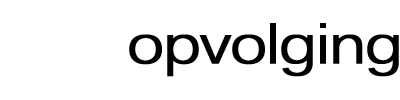
<style>
.page{position:relative;width:400px;height:100px;background:#ffffff}
.page>*{position:absolute;margin:0}
.t1{font:54.4px "Kalinga";letter-spacing:-0.05em;color:#000000;font-weight:bold;scale:1.12 1}
.t2{font:54.4px "Kalinga";letter-spacing:-0.05em;color:#ffffff;scale:1.12 1}
</style>
<div class="page">
<p class="t1" style="left:2px;top:23px;width:397px;height:54px"><span class="t2">dieet</span>opvolging</p>
</div>
